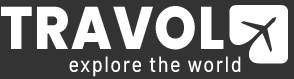
<style>
.page{position:relative;width:294px;height:79px;background:#333333}
.page>*{position:absolute;margin:0}
.t1{font:60px "Poppins-ExtraBold";letter-spacing:0.02em;color:#ffffff;scale:0.9 1}
.t2{font:22px "Barlow-Medium";letter-spacing:0.075em;color:#ffffff;scale:0.9 1}
</style>
<div class="page">
<p class="t1" style="left:1px;top:6px;width:223px;height:44px">TRAVOL</p>
<p class="t2" style="left:69px;top:56px;width:172px;height:21px">explore the world</p>
</div>
